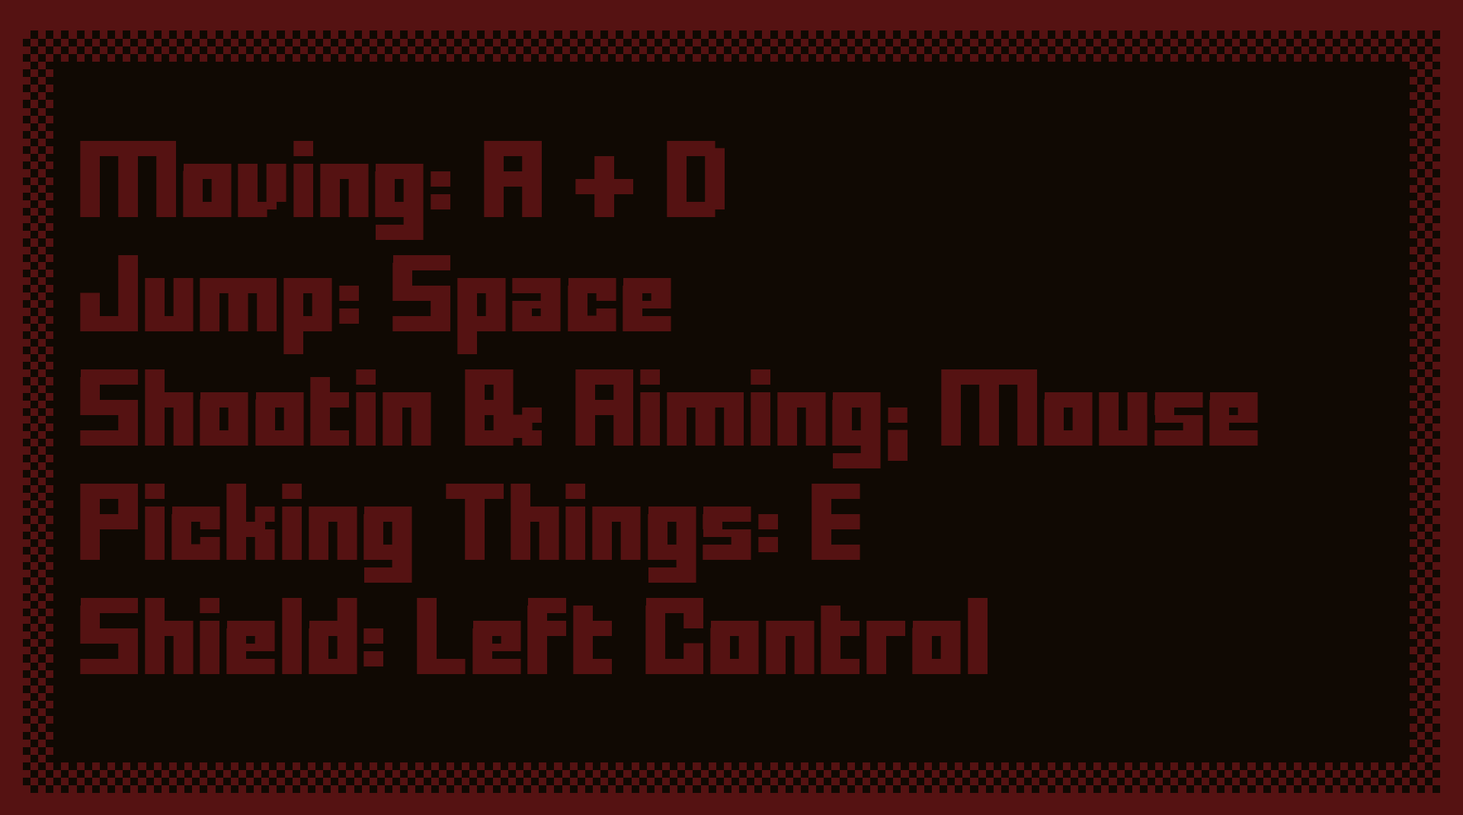
<style>
.page{position:relative;width:1463px;height:815px;background:#100903}
.page>*{position:absolute;margin:0}
.t1{font:60.9px/114.3px "FFFForward";letter-spacing:-0.025em;color:#551212;scale:1.25 1}
</style>
<div class="page">
<p class="t1" style="left:80px;top:141px;width:1178px;height:533px">Moving: A + D<br>Jump: Space<br>Shootin &amp; Aiming; Mouse<br>Picking Things: E<br>Shield: Left Control</p>
</div>
